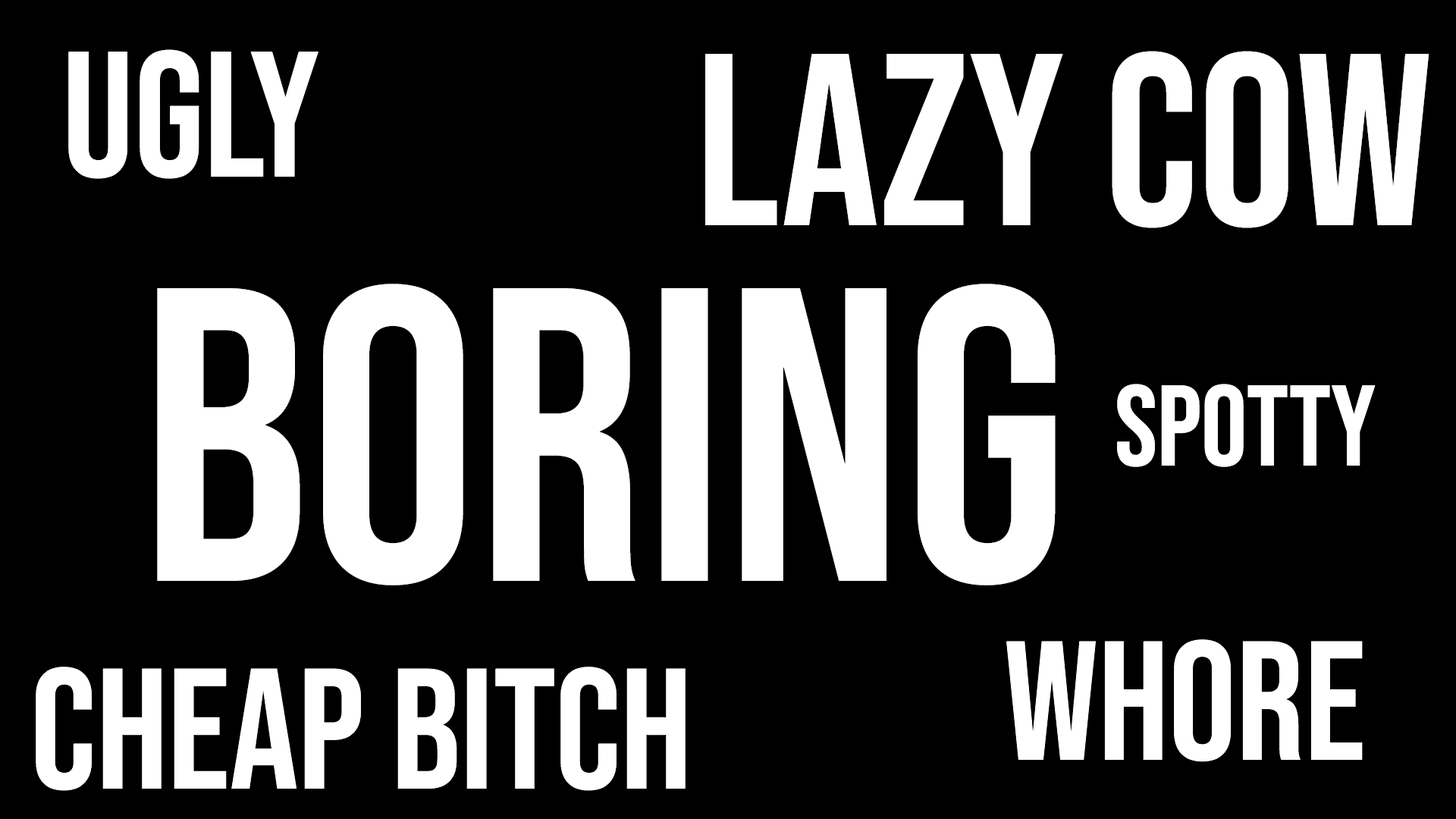
<style>
.page{position:relative;width:1456px;height:819px;background:#000000}
.page>*{position:absolute;margin:0}
.t1{font:178px "BebasNeue-Regular";color:#ffffff}
.t2{font:244.8px "BebasNeue-Regular";color:#ffffff}
.t3{font:418.1px "BebasNeue-Regular";color:#ffffff}
.t4{font:114.1px "BebasNeue-Regular";color:#ffffff}
.t5{font:170.8px "BebasNeue-Regular";color:#ffffff}
</style>
<div class="page">
<p class="t1" style="left:68px;top:49px;width:250px;height:130px">UGLY</p>
<p class="t2" style="left:705px;top:51px;width:724px;height:177px">Lazy COW</p>
<p class="t3" style="left:157px;top:284px;width:899px;height:301px">boring</p>
<p class="t4" style="left:1117px;top:384px;width:259px;height:83px">SPOTTY</p>
<p class="t5" style="left:36px;top:667px;width:650px;height:124px">CHeap bitch</p>
</div>
